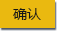
<style>
.page{position:relative;width:57px;height:31px;background:#eab910}
.page>*{position:absolute;margin:0}
.t1{font:14px "MicrosoftYaHei";color:#171817}
</style>
<div class="page">
<p class="t1" style="left:13px;top:8px;width:28px;height:12px">确认</p>
</div>
